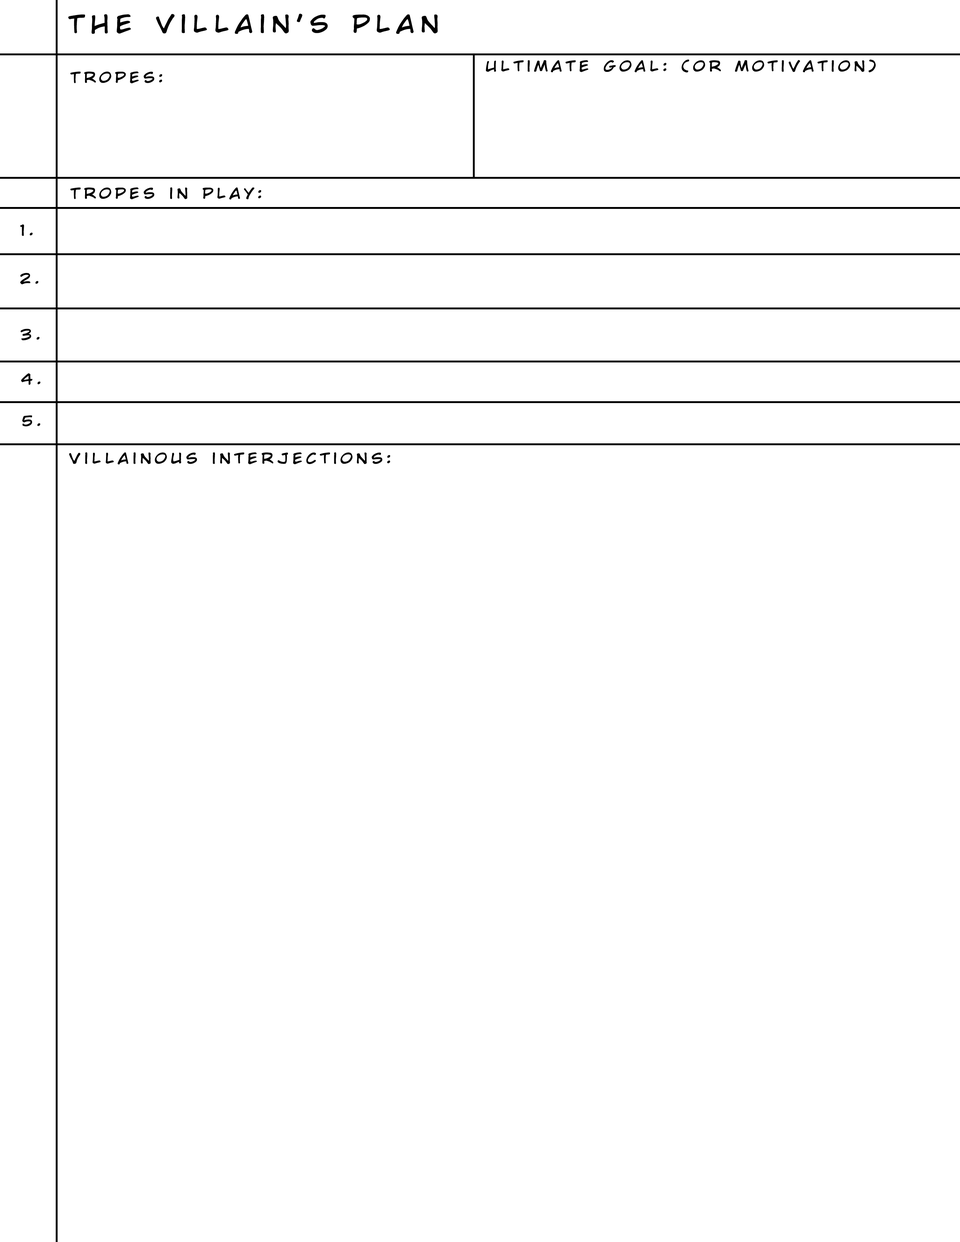
<style>
.page{position:relative;width:960px;height:1242px;background:#ffffff}
.page>*{position:absolute;margin:0}
.t1{font:23.4px "WildWordsRoman";letter-spacing:0.22em;color:#000000;scale:1.17 1}
.t2{font:14.3px "WildWordsRoman";letter-spacing:0.22em;color:#000000;scale:1.17 1}
</style>
<div class="page">
<p class="t1" style="left:68px;top:14px;width:370px;height:20px">The villain’s plan</p>
<p class="t2" style="left:486px;top:59px;width:390px;height:14px">Ultimate goal: (or motivation)</p>
<p class="t2" style="left:70px;top:72px;width:92px;height:12px">Tropes:</p>
<p class="t2" style="left:70px;top:187px;width:191px;height:13px">Tropes in play:</p>
<p class="t2" style="left:20px;top:224px;width:13px;height:12px">1.</p>
<p class="t2" style="left:20px;top:273px;width:18px;height:12px">2.</p>
<p class="t2" style="left:20px;top:329px;width:20px;height:12px">3.</p>
<p class="t2" style="left:21px;top:373px;width:20px;height:12px">4.</p>
<p class="t2" style="left:22px;top:415px;width:18px;height:12px">5.</p>
<p class="t2" style="left:69px;top:452px;width:321px;height:13px">Villainous interjections:</p>
</div>
